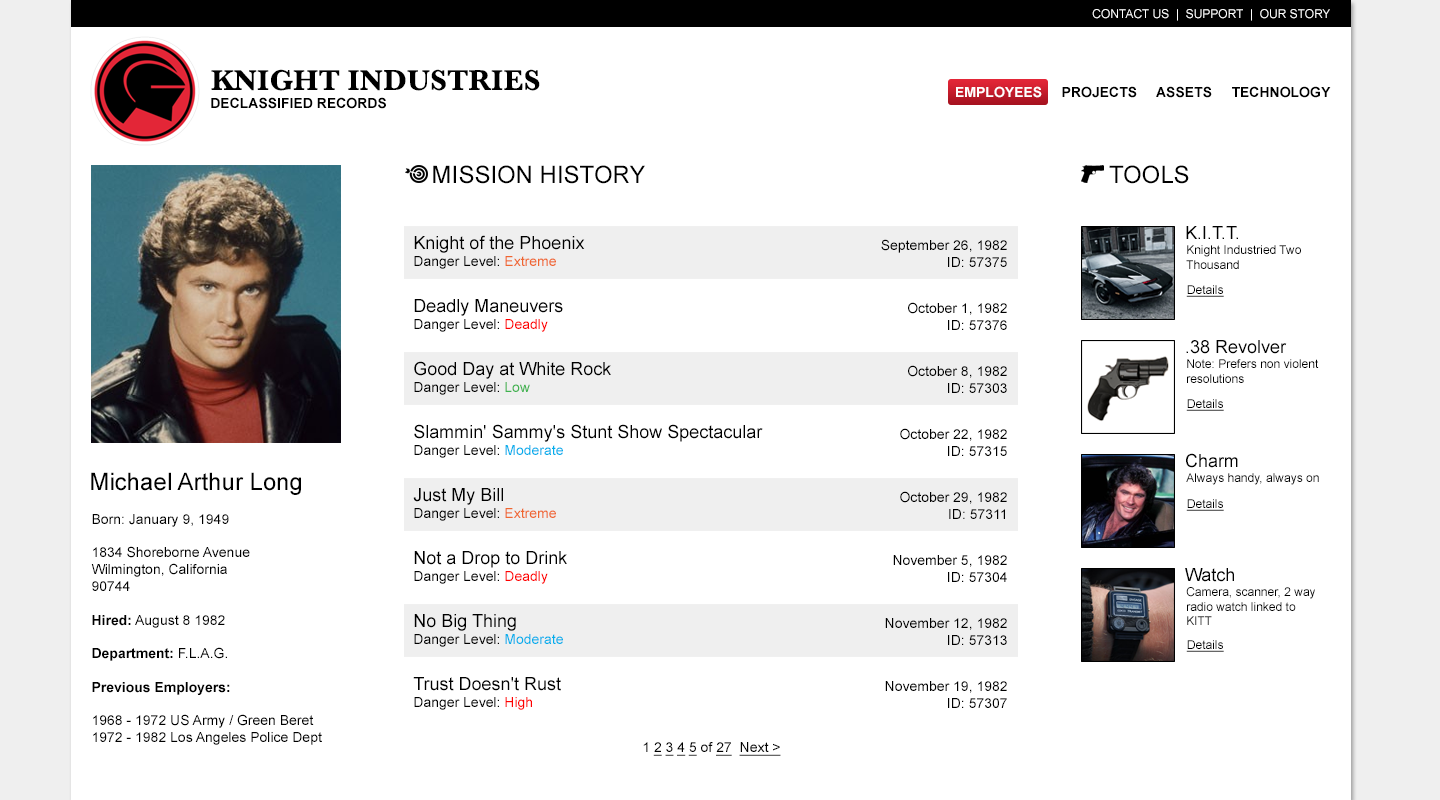
<style>
.page{position:relative;width:1440px;height:800px;background:#ffffff}
.page>*{position:absolute;margin:0}
.t1{font:12px "ArialMT";color:#ffffff;text-transform:uppercase}
.t2{font:30px "Baskerville-Bold";color:#000000}
.t3{font:14px "Arial-BoldMT";color:#000000}
.t4{font:14px "Arial-BoldMT";color:#ffffff}
.t5{font:24px "ArialMT";color:#000000}
.t6{font:18px "ArialMT";color:#000000}
.t7{font:14px "ArialMT";color:#000000}
.t8{font:14px "ArialMT";color:#ef662f}
.t9{font:12px "ArialMT";color:#000000}
.t10{font:12px "ArialMT";color:#000000;text-decoration:underline}
.t11{font:14px "ArialMT";color:#ff0000}
.t12{font:14px "ArialMT";color:#3fb34f}
.t13{font:14px "ArialMT";color:#00afec}
.t14{font:14px "ArialMT";color:#000000;text-decoration:underline}
</style>
<div class="page">
<p class="t1" style="left:1092px;top:9px;width:238px;height:12px">Contact Us  |  Support  |  Our Story</p>
<p class="t2" style="left:211px;top:69px;width:329px;height:22px">KNIGHT INDUSTRIES</p>
<p class="t3" style="left:956px;top:86px;width:375px;height:12px"><span class="t4">EMPLOYEES</span>     PROJECTS     ASSETS     TECHNOLOGY</p>
<p class="t3" style="left:211px;top:97px;width:175px;height:12px">DECLASSIFIED RECORDS</p>
<p class="t5" style="left:433px;top:165px;width:212px;height:19px">MISSION HISTORY</p>
<p class="t5" style="left:1109px;top:165px;width:80px;height:19px">TOOLS</p>
<p class="t6" style="left:1186px;top:226px;width:52px;height:13px">K.I.T.T.</p>
<p class="t6" style="left:414px;top:235px;width:171px;height:34px">Knight of the Phoenix<br><span class="t7">Danger Level: </span><span class="t8">Extreme</span></p>
<p class="t7" style="left:881px;top:239px;width:126px;height:28px;text-align:right">September 26, 1982<br>ID: 57375</p>
<p class="t9" style="left:1186px;top:245px;width:115px;height:24px">Knight Industried Two <br>Thousand</p>
<p class="t10" style="left:1186px;top:285px;width:38px;height:12px">Details</p>
<p class="t6" style="left:414px;top:299px;width:149px;height:33px">Deadly Maneuvers<br><span class="t7">Danger Level: </span><span class="t11">Deadly</span></p>
<p class="t7" style="left:908px;top:302px;width:99px;height:28px;text-align:right">October 1, 1982<br>ID: 57376</p>
<p class="t6" style="left:1186px;top:340px;width:101px;height:14px">.38 Revolver</p>
<p class="t6" style="left:414px;top:361px;width:197px;height:34px">Good Day at White Rock<br><span class="t7">Danger Level: </span><span class="t12">Low</span></p>
<p class="t7" style="left:908px;top:365px;width:99px;height:28px;text-align:right">October 8, 1982<br>ID: 57303</p>
<p class="t9" style="left:1187px;top:359px;width:132px;height:24px">Note: Prefers non violent<br>resolutions</p>
<p class="t10" style="left:1186px;top:399px;width:38px;height:12px">Details</p>
<p class="t6" style="left:414px;top:424px;width:349px;height:34px">Slammin' Sammy's Stunt Show Spectacular<br><span class="t7">Danger Level: </span><span class="t13">Moderate</span></p>
<p class="t7" style="left:900px;top:428px;width:107px;height:28px;text-align:right">October 22, 1982<br>ID: 57315</p>
<p class="t6" style="left:1186px;top:453px;width:52px;height:15px">Charm</p>
<p class="t5" style="left:91px;top:472px;width:210px;height:23px">Michael Arthur Long</p>
<p class="t9" style="left:1186px;top:473px;width:133px;height:12px">Always handy, always on</p>
<p class="t7" style="left:413px;top:488px;width:143px;height:33px"><span class="t6">Just My Bill<br></span>Danger Level: <span class="t8">Extreme</span></p>
<p class="t7" style="left:900px;top:491px;width:107px;height:28px;text-align:right">October 29, 1982<br>ID: 57311</p>
<p class="t10" style="left:1186px;top:499px;width:38px;height:12px">Details</p>
<p class="t7" style="left:91px;top:514px;width:231px;height:231px">Born: January 9, 1949<br><br>1834 Shoreborne Avenue<br>Wilmington, California<br>90744<br><br><span class="t3">Hired:</span> August 8 1982<br><br><span class="t3">Department:</span> F.L.A.G.<br><br><span class="t3">Previous Employers:<br></span><br>1968 - 1972 US Army / Green Beret<br>1972 - 1982 Los Angeles Police Dept</p>
<p class="t6" style="left:414px;top:551px;width:153px;height:33px">Not a Drop to Drink<br><span class="t7">Danger Level: </span><span class="t11">Deadly</span></p>
<p class="t7" style="left:893px;top:555px;width:114px;height:27px;text-align:right">November 5, 1982<br>ID: 57304</p>
<p class="t6" style="left:1185px;top:568px;width:49px;height:14px">Watch</p>
<p class="t9" style="left:1186px;top:587px;width:129px;height:38px">Camera, scanner, 2 way <br>radio watch linked to <br>KITT</p>
<p class="t7" style="left:414px;top:614px;width:149px;height:33px"><span class="t6">No Big Thing<br></span>Danger Level: <span class="t13">Moderate</span></p>
<p class="t7" style="left:885px;top:618px;width:122px;height:27px;text-align:right">November 12, 1982<br>ID: 57313</p>
<p class="t10" style="left:1186px;top:640px;width:38px;height:12px">Details</p>
<p class="t6" style="left:413px;top:677px;width:148px;height:33px">Trust Doesn't Rust<br><span class="t7">Danger Level: </span><span class="t11">High</span></p>
<p class="t7" style="left:885px;top:681px;width:122px;height:27px;text-align:right">November 19, 1982<br>ID: 57307</p>
<p class="t14" style="left:643px;top:742px;width:138px;height:14px"><span class="t7">1 </span>2 3 4 5<span class="t7"> of </span>27  Next &gt;</p>
</div>
